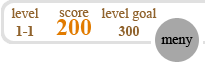
<style>
.page{position:relative;width:205px;height:69px;background:#ffffff}
.page>*{position:absolute;margin:0}
.t1{font:14px/18px "TimesNewRomanPSMT";color:#90632d}
.t2{font:14px/18px "TimesNewRomanPS-BoldMT";color:#90632d}
.t3{font:24px/18px "TimesNewRomanPS-BoldMT";color:#e17b00}
.t4{font:14px "TimesNewRomanPSMT";color:#000000}
</style>
<div class="page">
<p class="t1" style="left:11px;top:8px;width:28px;height:28px;text-align:center">level<br><span class="t2">1-1</span></p>
<p class="t1" style="left:56px;top:10px;width:35px;height:25px;text-align:center">score<br><span class="t3">200</span></p>
<p class="t1" style="left:101px;top:8px;width:56px;height:28px;text-align:center">level goal<br><span class="t2">300</span></p>
<p class="t4" style="left:161px;top:37px;width:32px;height:10px">meny</p>
</div>
